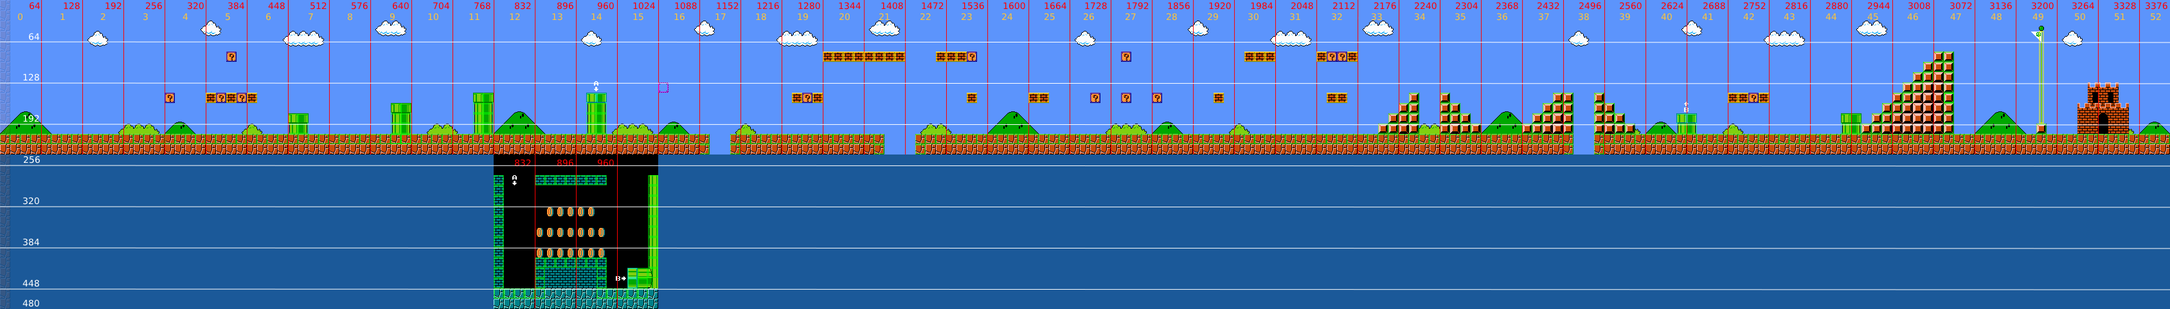
<style>
.page{position:relative;width:2170px;height:309px;background:#1b5999}
.page>*{position:absolute;margin:0}
.t1{font:9px "DejaVuSans";color:#ff0000}
.t2{font:9px "DejaVuSans";color:#ffc439}
.t3{font:9px "DejaVuSans";color:#ffffff}
</style>
<div class="page">
<p class="t1" style="left:29px;top:2px;width:11px;height:8px">64</p>
<p class="t1" style="left:64px;top:2px;width:16px;height:8px">128</p>
<p class="t1" style="left:105px;top:2px;width:17px;height:8px">192</p>
<p class="t1" style="left:146px;top:2px;width:16px;height:8px">256</p>
<p class="t1" style="left:188px;top:2px;width:16px;height:8px">320</p>
<p class="t1" style="left:228px;top:2px;width:16px;height:8px">384</p>
<p class="t1" style="left:268px;top:2px;width:17px;height:8px">448</p>
<p class="t1" style="left:310px;top:2px;width:17px;height:8px">512</p>
<p class="t1" style="left:352px;top:2px;width:16px;height:8px">576</p>
<p class="t1" style="left:392px;top:2px;width:17px;height:8px">640</p>
<p class="t1" style="left:433px;top:2px;width:16px;height:8px">704</p>
<p class="t1" style="left:474px;top:2px;width:17px;height:8px">768</p>
<p class="t1" style="left:514px;top:2px;width:17px;height:8px">832</p>
<p class="t1" style="left:557px;top:2px;width:16px;height:8px">896</p>
<p class="t1" style="left:597px;top:2px;width:17px;height:8px">960</p>
<p class="t1" style="left:633px;top:2px;width:22px;height:8px">1024</p>
<p class="t1" style="left:675px;top:2px;width:22px;height:8px">1088</p>
<p class="t1" style="left:717px;top:2px;width:22px;height:8px">1152</p>
<p class="t1" style="left:757px;top:2px;width:22px;height:8px">1216</p>
<p class="t1" style="left:798px;top:2px;width:22px;height:8px">1280</p>
<p class="t1" style="left:839px;top:2px;width:22px;height:8px">1344</p>
<p class="t1" style="left:881px;top:2px;width:22px;height:8px">1408</p>
<p class="t1" style="left:922px;top:2px;width:22px;height:7px">1472</p>
<p class="t1" style="left:962px;top:2px;width:22px;height:8px">1536</p>
<p class="t1" style="left:1004px;top:2px;width:21px;height:8px">1600</p>
<p class="t1" style="left:1045px;top:2px;width:21px;height:8px">1664</p>
<p class="t1" style="left:1085px;top:2px;width:22px;height:8px">1728</p>
<p class="t1" style="left:1127px;top:2px;width:22px;height:8px">1792</p>
<p class="t1" style="left:1168px;top:2px;width:22px;height:8px">1856</p>
<p class="t1" style="left:1209px;top:2px;width:22px;height:8px">1920</p>
<p class="t1" style="left:1251px;top:2px;width:22px;height:8px">1984</p>
<p class="t1" style="left:1292px;top:2px;width:21px;height:8px">2048</p>
<p class="t1" style="left:1333px;top:2px;width:22px;height:7px">2112</p>
<p class="t1" style="left:1374px;top:2px;width:22px;height:8px">2176</p>
<p class="t1" style="left:1415px;top:2px;width:22px;height:8px">2240</p>
<p class="t1" style="left:1456px;top:2px;width:22px;height:8px">2304</p>
<p class="t1" style="left:1497px;top:2px;width:21px;height:8px">2368</p>
<p class="t1" style="left:1538px;top:2px;width:22px;height:8px">2432</p>
<p class="t1" style="left:1580px;top:2px;width:21px;height:8px">2496</p>
<p class="t1" style="left:1620px;top:2px;width:22px;height:8px">2560</p>
<p class="t1" style="left:1662px;top:2px;width:22px;height:8px">2624</p>
<p class="t1" style="left:1704px;top:2px;width:21px;height:8px">2688</p>
<p class="t1" style="left:1744px;top:2px;width:22px;height:8px">2752</p>
<p class="t1" style="left:1786px;top:2px;width:22px;height:8px">2816</p>
<p class="t1" style="left:1826px;top:2px;width:22px;height:8px">2880</p>
<p class="t1" style="left:1868px;top:2px;width:22px;height:8px">2944</p>
<p class="t1" style="left:1909px;top:2px;width:22px;height:8px">3008</p>
<p class="t1" style="left:1950px;top:2px;width:22px;height:8px">3072</p>
<p class="t1" style="left:1990px;top:2px;width:22px;height:8px">3136</p>
<p class="t1" style="left:2032px;top:2px;width:22px;height:8px">3200</p>
<p class="t1" style="left:2073px;top:2px;width:21px;height:8px">3264</p>
<p class="t1" style="left:2114px;top:2px;width:22px;height:8px">3328</p>
<p class="t1" style="left:2146px;top:2px;width:22px;height:8px">3376</p>
<p class="t2" style="left:17px;top:13px;width:5px;height:8px">0</p>
<p class="t2" style="left:60px;top:13px;width:5px;height:7px">1</p>
<p class="t2" style="left:101px;top:13px;width:4px;height:7px">2</p>
<p class="t2" style="left:143px;top:13px;width:5px;height:8px">3</p>
<p class="t2" style="left:183px;top:13px;width:5px;height:7px">4</p>
<p class="t2" style="left:226px;top:13px;width:4px;height:8px">5</p>
<p class="t2" style="left:266px;top:13px;width:5px;height:8px">6</p>
<p class="t2" style="left:309px;top:13px;width:4px;height:7px">7</p>
<p class="t2" style="left:347px;top:13px;width:5px;height:8px">8</p>
<p class="t2" style="left:390px;top:13px;width:5px;height:8px">9</p>
<p class="t2" style="left:428px;top:13px;width:10px;height:8px">10</p>
<p class="t2" style="left:469px;top:13px;width:11px;height:7px">11</p>
<p class="t2" style="left:510px;top:13px;width:10px;height:7px">12</p>
<p class="t2" style="left:552px;top:13px;width:10px;height:8px">13</p>
<p class="t2" style="left:591px;top:13px;width:11px;height:7px">14</p>
<p class="t2" style="left:633px;top:13px;width:11px;height:8px">15</p>
<p class="t2" style="left:674px;top:13px;width:11px;height:8px">16</p>
<p class="t2" style="left:716px;top:13px;width:10px;height:7px">17</p>
<p class="t2" style="left:756px;top:13px;width:10px;height:8px">18</p>
<p class="t2" style="left:798px;top:13px;width:10px;height:8px">19</p>
<p class="t2" style="left:840px;top:13px;width:10px;height:8px">20</p>
<p class="t2" style="left:879px;top:13px;width:11px;height:7px">21</p>
<p class="t2" style="left:921px;top:13px;width:10px;height:7px">22</p>
<p class="t2" style="left:962px;top:13px;width:10px;height:8px">23</p>
<p class="t2" style="left:1002px;top:13px;width:11px;height:7px">24</p>
<p class="t2" style="left:1045px;top:13px;width:10px;height:8px">25</p>
<p class="t2" style="left:1084px;top:13px;width:10px;height:8px">26</p>
<p class="t2" style="left:1126px;top:13px;width:10px;height:7px">27</p>
<p class="t2" style="left:1167px;top:13px;width:10px;height:8px">28</p>
<p class="t2" style="left:1208px;top:13px;width:10px;height:8px">29</p>
<p class="t2" style="left:1248px;top:13px;width:11px;height:8px">30</p>
<p class="t2" style="left:1290px;top:13px;width:10px;height:8px">31</p>
<p class="t2" style="left:1332px;top:13px;width:10px;height:8px">32</p>
<p class="t2" style="left:1372px;top:13px;width:10px;height:8px">33</p>
<p class="t2" style="left:1415px;top:13px;width:11px;height:8px">34</p>
<p class="t2" style="left:1455px;top:13px;width:11px;height:8px">35</p>
<p class="t2" style="left:1497px;top:13px;width:11px;height:8px">36</p>
<p class="t2" style="left:1539px;top:13px;width:10px;height:8px">37</p>
<p class="t2" style="left:1579px;top:13px;width:10px;height:8px">38</p>
<p class="t2" style="left:1620px;top:13px;width:10px;height:8px">39</p>
<p class="t2" style="left:1661px;top:13px;width:11px;height:8px">40</p>
<p class="t2" style="left:1702px;top:13px;width:11px;height:7px">41</p>
<p class="t2" style="left:1743px;top:13px;width:11px;height:7px">42</p>
<p class="t2" style="left:1784px;top:13px;width:11px;height:8px">43</p>
<p class="t2" style="left:1826px;top:13px;width:11px;height:7px">44</p>
<p class="t2" style="left:1868px;top:13px;width:10px;height:8px">45</p>
<p class="t2" style="left:1907px;top:13px;width:11px;height:8px">46</p>
<p class="t2" style="left:1950px;top:13px;width:11px;height:7px">47</p>
<p class="t2" style="left:1991px;top:13px;width:11px;height:8px">48</p>
<p class="t2" style="left:2033px;top:13px;width:11px;height:8px">49</p>
<p class="t2" style="left:2075px;top:13px;width:10px;height:8px">50</p>
<p class="t2" style="left:2115px;top:13px;width:10px;height:8px">51</p>
<p class="t2" style="left:2151px;top:13px;width:10px;height:8px">52</p>
<p class="t3" style="left:28px;top:33px;width:12px;height:7px">64</p>
<p class="t3" style="left:23px;top:73px;width:16px;height:8px">128</p>
<p class="t3" style="left:23px;top:114px;width:16px;height:8px">192</p>
<p class="t3" style="left:24px;top:156px;width:16px;height:7px">256</p>
<p class="t1" style="left:514px;top:159px;width:17px;height:7px">832</p>
<p class="t1" style="left:557px;top:159px;width:16px;height:7px">896</p>
<p class="t1" style="left:597px;top:159px;width:17px;height:7px">960</p>
<p class="t3" style="left:23px;top:197px;width:16px;height:7px">320</p>
<p class="t3" style="left:23px;top:238px;width:16px;height:8px">384</p>
<p class="t3" style="left:22px;top:279px;width:17px;height:8px">448</p>
<p class="t3" style="left:22px;top:299px;width:17px;height:8px">480</p>
</div>
